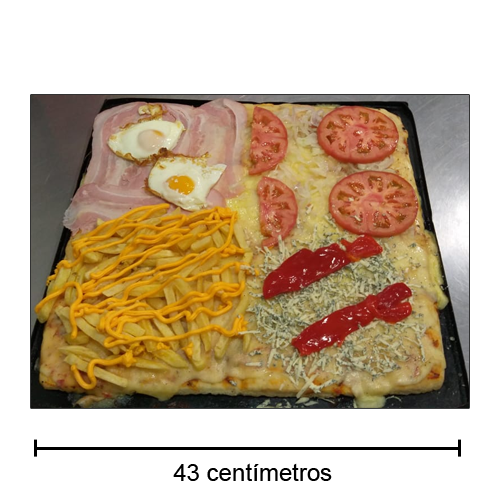
<style>
.page{position:relative;width:500px;height:500px;background:#ffffff}
.page>*{position:absolute;margin:0}
.t1{font:24px "ArialMT";color:#000000}
</style>
<div class="page">
<p class="t1" style="left:173px;top:463px;width:159px;height:18px">43 centímetros</p>
</div>
